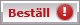
<style>
.page{position:relative;width:80px;height:25px}
.page>*{position:absolute;margin:0}
.t1{font:11px "Verdana-Bold";color:#bd1418}
.t2{font:12px "Verdana-Bold";color:#ffffff}
</style>
<div class="page">
<p class="t1" style="left:8px;top:8px;width:42px;height:9px">Beställ</p>
<p class="t2" style="left:63px;top:7px;width:3px;height:9px">!</p>
</div>
